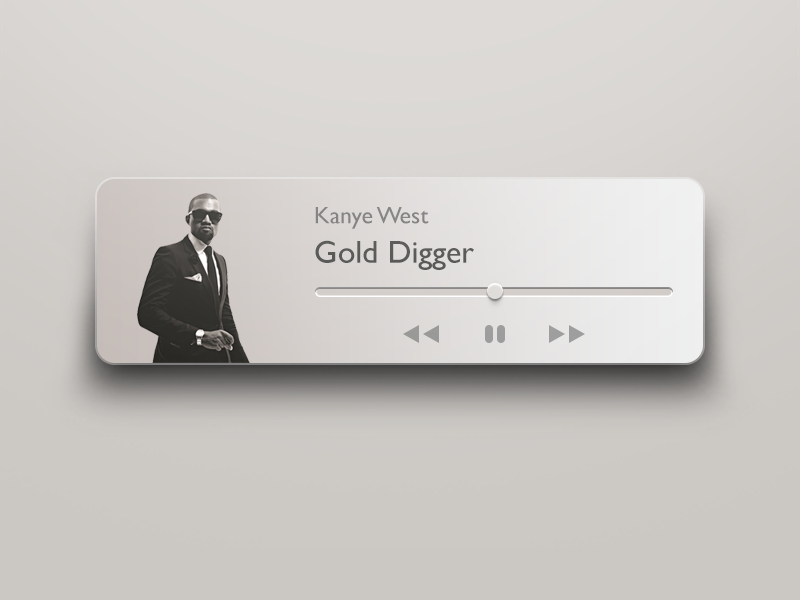
<style>
.page{position:relative;width:800px;height:600px}
.page>*{position:absolute;margin:0}
.t1{font:24px "GillSans";color:#858585}
.t2{font:32px "GillSans";color:#5a5a58}
</style>
<div class="page">
<p class="t1" style="left:315px;top:207px;width:114px;height:22px">Kanye West</p>
<p class="t2" style="left:315px;top:240px;width:159px;height:30px">Gold Digger</p>
</div>
